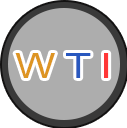
<style>
.page{position:relative;width:127px;height:128px;background:#adadad}
.page>*{position:absolute;margin:0}
.t1{font:34.7px "ArialMT";letter-spacing:0.21em;color:#dd9523;scale:1.24 1}
.t2{font:34.7px "ArialMT";letter-spacing:0.21em;color:#2958bf;scale:1.24 1}
.t3{font:34.7px "ArialMT";letter-spacing:0.21em;color:#ff3737;scale:1.24 1}
</style>
<div class="page">
<p class="t1" style="left:15px;top:53px;width:94px;height:25px">W<span class="t2">T</span><span class="t3">I</span></p>
</div>
